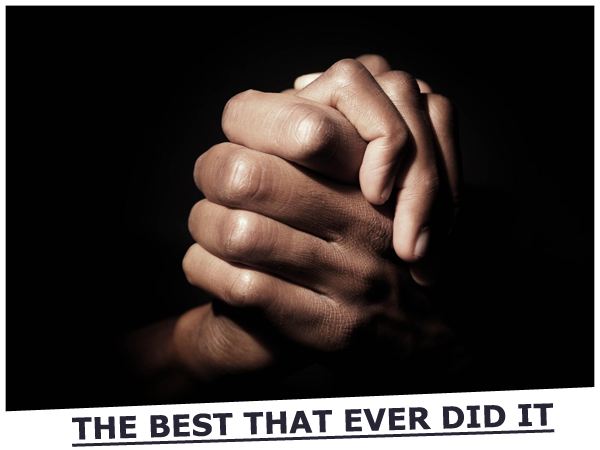
<style>
.page{position:relative;width:600px;height:450px;background:#010101}
.page>*{position:absolute;margin:0}
.t1{font:30px "Verdana-Bold";color:#272433;text-decoration:underline}
</style>
<div class="page">
<p class="t1" style="left:72px;top:403px;width:483px;height:44px;rotate:-2deg">THE BEST THAT EVER DID IT</p>
</div>
